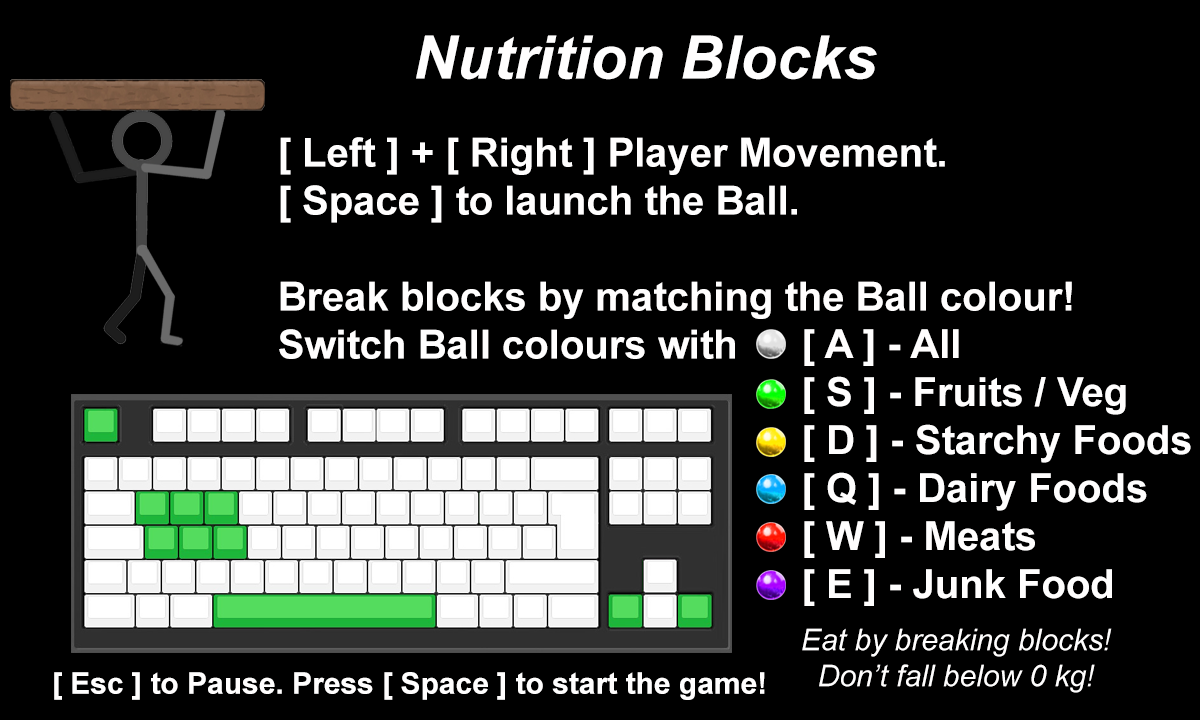
<style>
.page{position:relative;width:1200px;height:720px;background:#000000}
.page>*{position:absolute;margin:0}
.t1{font:60px "Arial-BoldItalicMT";color:#fffefe}
.t2{font:40px "Arial-BoldMT";color:#fffefe}
.t3{font:30px "Arial-ItalicMT";color:#fffefe}
.t4{font:30px "Arial-BoldMT";color:#fffefe}
</style>
<div class="page">
<p class="t1" style="left:416px;top:35px;width:461px;height:45px">Nutrition Blocks</p>
<p class="t2" style="left:279px;top:137px;width:793px;height:222px">[ Left ] + [ Right ] Player Movement.<br>[ Space ] to launch the Ball.<br><br>Break blocks by matching the Ball colour!<br>Switch Ball colours with</p>
<p class="t2" style="left:804px;top:329px;width:387px;height:277px">[ A ] - All<br>[ S ] - Fruits / Veg<br>[ D ] - Starchy Foods<br>[ Q ] - Dairy Foods<br>[ W ] - Meats<br>[ E ] - Junk Food</p>
<p class="t3" style="left:802px;top:628px;width:310px;height:65px;text-align:center">Eat by breaking blocks!<br>Don’t fall below 0 kg!</p>
<p class="t4" style="left:54px;top:672px;width:711px;height:28px">[ Esc ] to Pause. Press [ Space ] to start the game!</p>
</div>
